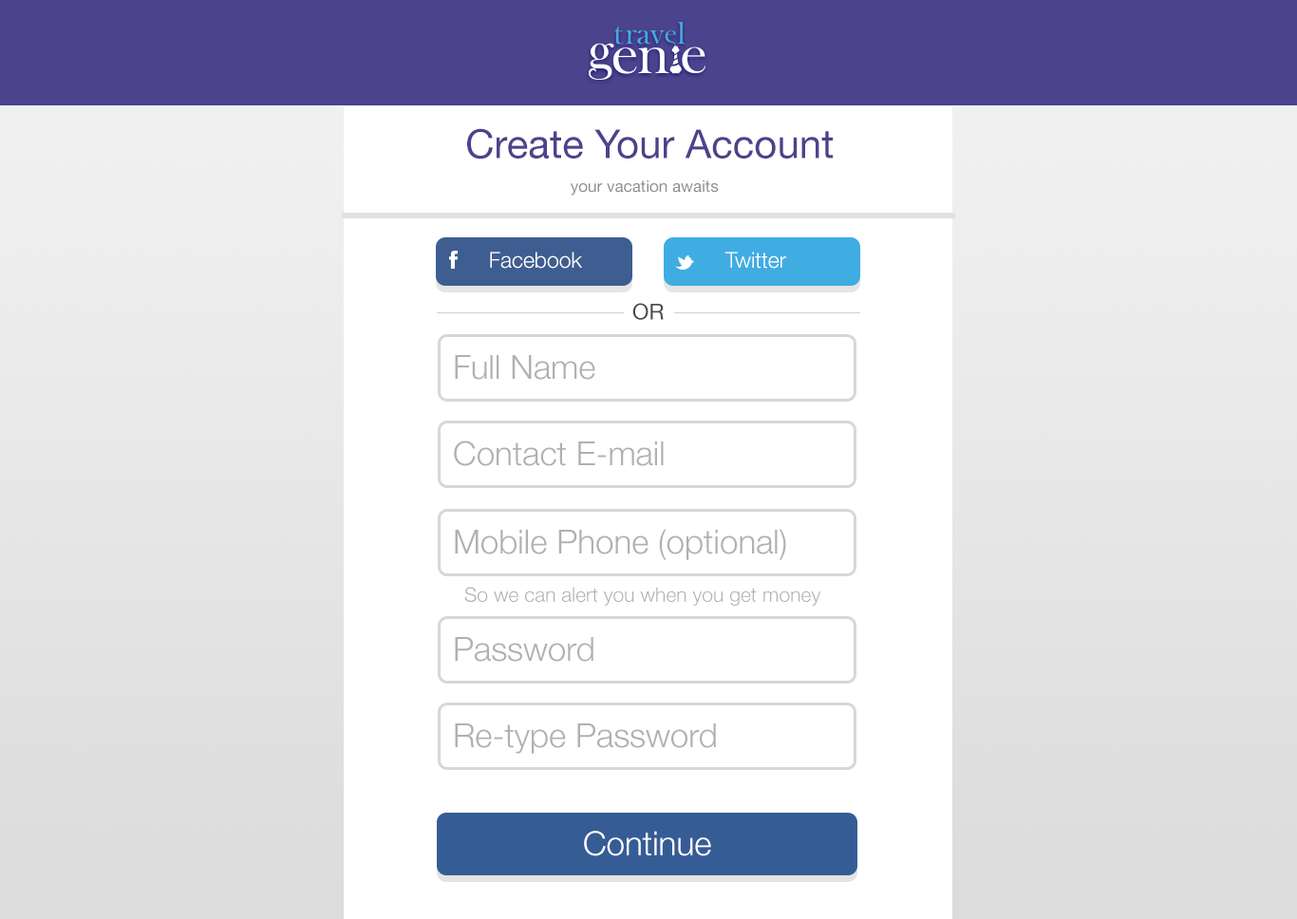
<style>
.page{position:relative;width:1297px;height:919px;background:#ffffff}
.page>*{position:absolute;margin:0}
.t1{font:39.9px "HelveticaNeue";color:#4b438c}
.t2{font:16.1px "HelveticaNeue";color:#8f8f8f}
.t3{font:21.8px "HelveticaNeue-Light";color:#ffffff}
.t4{font:22px "HelveticaNeue";color:#4a4a4a}
.t5{font:33.2px "HelveticaNeue-Light";color:#b1b0b0}
.t6{font:20px "HelveticaNeue-Light";color:#b1b0b0}
.t7{font:33.2px "HelveticaNeue-Light";color:#ffffff}
</style>
<div class="page">
<p class="t1" style="left:467px;top:128px;width:367px;height:32px">Create Your Account</p>
<p class="t2" style="left:571px;top:179px;width:148px;height:17px">your vacation awaits</p>
<p class="t3" style="left:490px;top:252px;width:92px;height:17px">Facebook</p>
<p class="t3" style="left:725px;top:252px;width:61px;height:17px">Twitter</p>
<p class="t4" style="left:632px;top:303px;width:32px;height:17px">OR</p>
<p class="t5" style="left:455px;top:355px;width:140px;height:25px">Full Name</p>
<p class="t5" style="left:454px;top:441px;width:210px;height:25px">Contact E-mail</p>
<p class="t5" style="left:455px;top:529px;width:331px;height:31px">Mobile Phone (optional)</p>
<p class="t6" style="left:464px;top:587px;width:357px;height:19px">So we can alert you when you get money</p>
<p class="t5" style="left:455px;top:637px;width:139px;height:25px">Password</p>
<p class="t5" style="left:455px;top:724px;width:261px;height:30px">Re-type Password</p>
<p class="t7" style="left:584px;top:831px;width:127px;height:26px">Continue</p>
</div>
